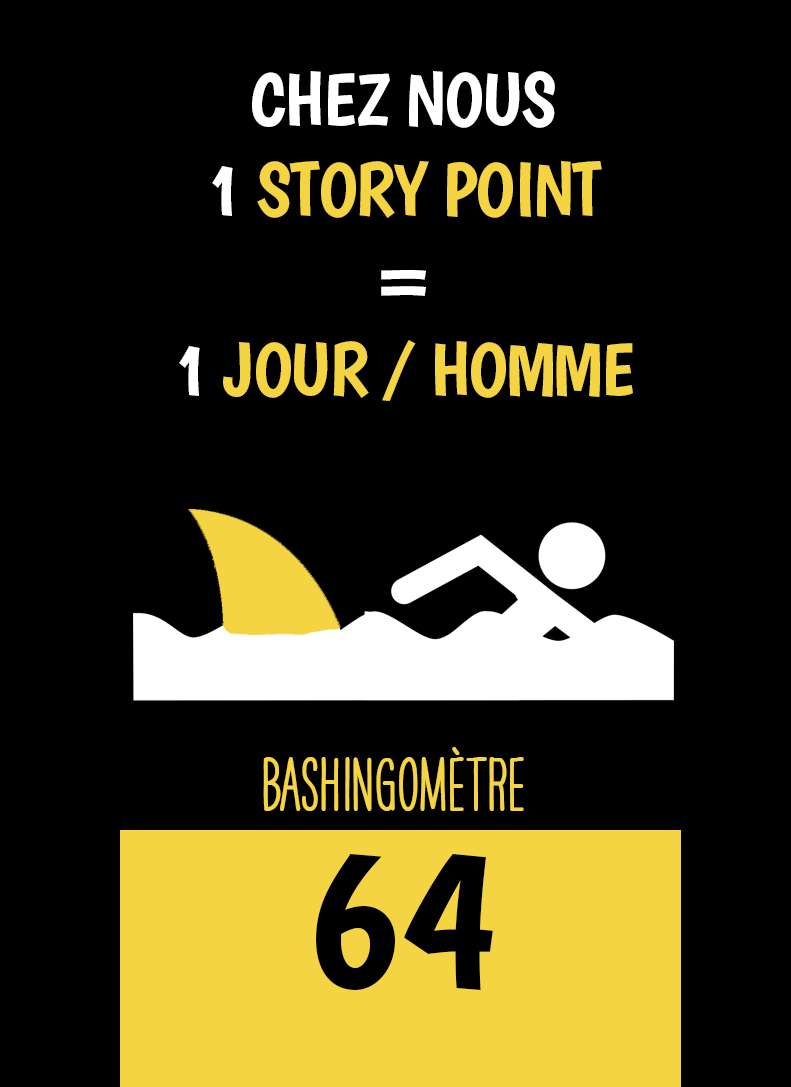
<style>
.page{position:relative;width:791px;height:1087px;background:#000000}
.page>*{position:absolute;margin:0}
.t1{font:75px "Boogaloo-Regular";letter-spacing:-0.02em;color:#f4d443}
.t2{font:75px "Boogaloo-Regular";letter-spacing:-0.02em;color:#ffffff}
.t3{font:66.7px "HAVEANICEDAYTallW04-Bold";color:#f4d443}
.t4{font:200px "Boogaloo-Regular";color:#000000}
</style>
<div class="page">
<p class="t1" style="left:179px;top:71px;width:454px;height:330px;text-align:center"><span class="t2">CHEZ NOUS<br>1 </span>STORY POINT<br><span class="t2">=<br>1 </span>JOUR / HOMME</p>
<p class="t3" style="left:263px;top:747px;width:261px;height:64px">BASHINgomètre</p>
<p class="t4" style="left:316px;top:854px;width:177px;height:136px">64</p>
</div>
